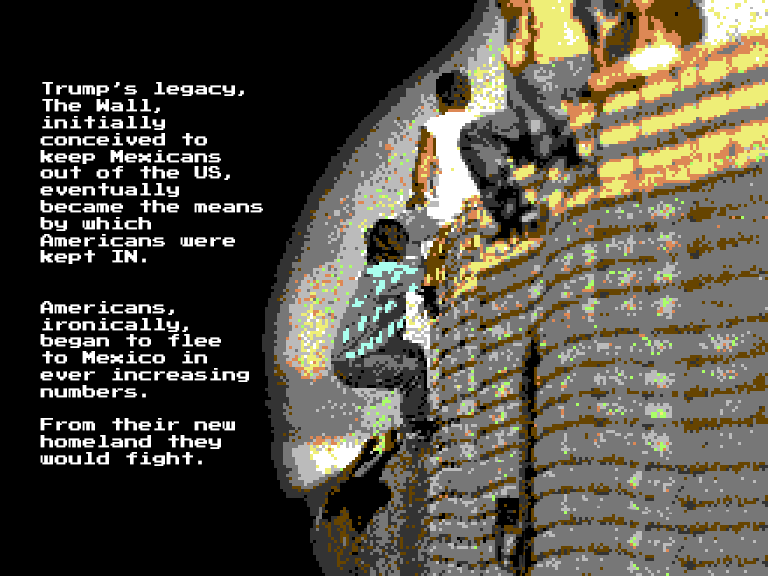
<style>
.page{position:relative;width:768px;height:576px;background:#000000}
.page>*{position:absolute;margin:0}
.t1{font:14px "PressStart2P";color:#ffffff}
</style>
<div class="page">
<p class="t1" style="left:40px;top:82px;width:223px;height:384px">Trump’s legacy, The Wall, <br>initially <br>conceived to keep Mexicans out of the US, eventually became the means by which <br>Americans were kept IN.<br><br><br>Americans, <br>ironically, began to flee <br>to Mexico in ever increasing <br>numbers. <br><br>From their new homeland they would fight.</p>
</div>
